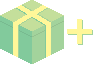
<style>
.page{position:relative;width:96px;height:64px;background:#ffffff}
.page>*{position:absolute;margin:0}
.t1{font:40px "PixelOperator8";letter-spacing:0.01em;color:#fff799}
</style>
<div class="page">
<p class="t1" style="left:67px;top:19px;width:25px;height:25px">+</p>
<p class="t1" style="left:68px;top:20px;width:25px;height:25px">+</p>
</div>
